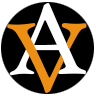
<style>
.page{position:relative;width:96px;height:96px;background:#000000}
.page>*{position:absolute;margin:0}
.t1{font:109px "HighTowerText-Reg";color:#fffeff}
</style>
<div class="page">
<p class="t1" style="left:9px;top:2px;width:77px;height:74px">A</p>
</div>
